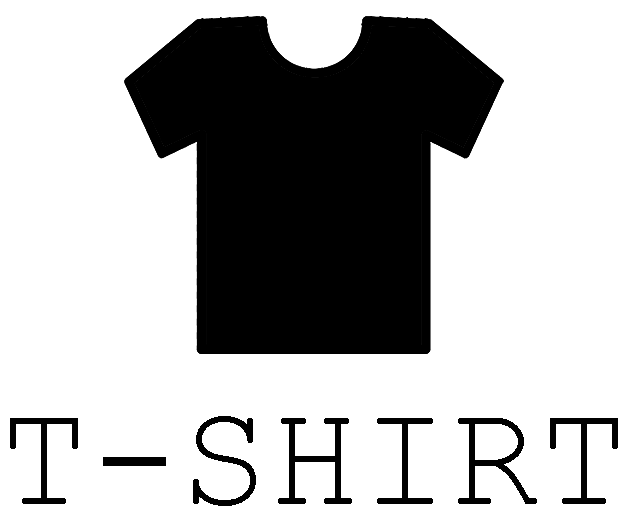
<style>
.page{position:relative;width:630px;height:514px;background:#ffffff}
.page>*{position:absolute;margin:0}
.t1{font:150px "CourierNewPSMT";color:#000000}
</style>
<div class="page">
<p class="t1" style="left:10px;top:416px;width:608px;height:90px">T-SHIRT</p>
</div>
